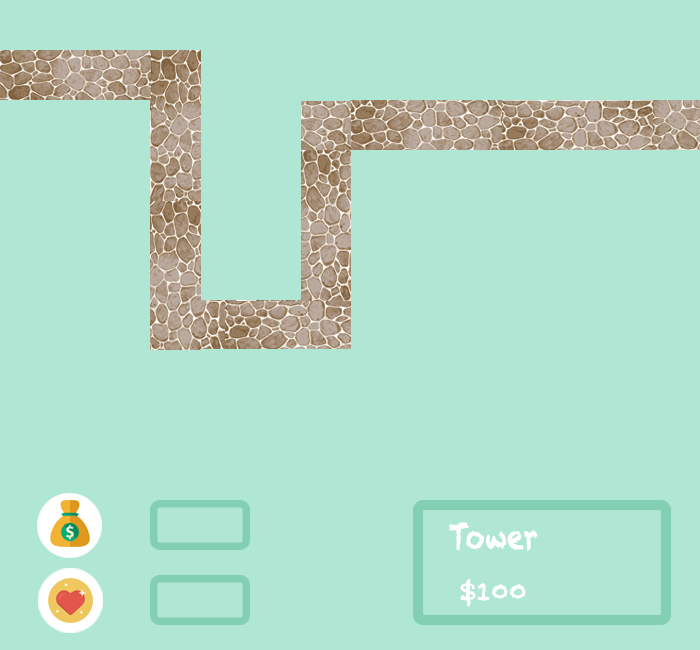
<style>
.page{position:relative;width:700px;height:650px;background:#b0e7d4}
.page>*{position:absolute;margin:0}
.t1{font:33.8px "Chalkduster";color:#ffffff;font-weight:bold;scale:0.76 1}
.t2{font:24px "Chalkduster";color:#ffffff;font-weight:bold}
</style>
<div class="page">
<p class="t1" style="left:449px;top:522px;width:89px;height:29px">Tower</p>
<p class="t2" style="left:460px;top:579px;width:66px;height:28px">$100</p>
</div>
